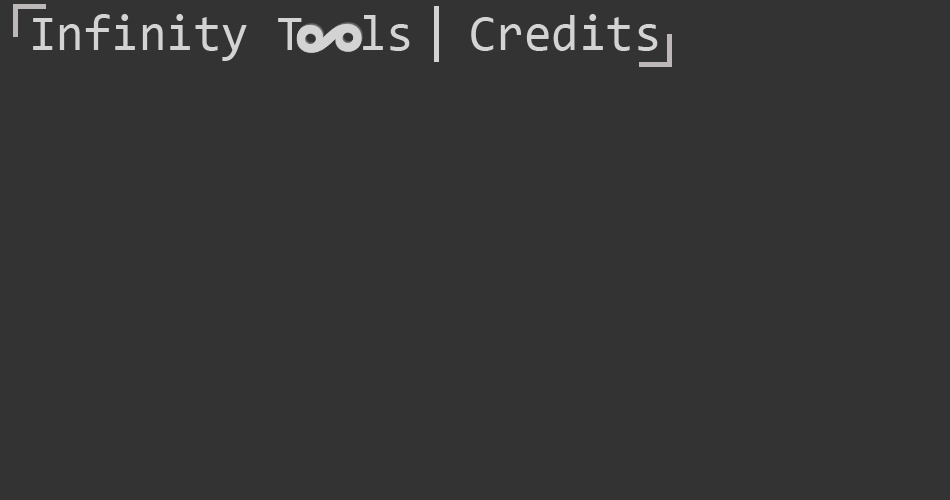
<style>
.page{position:relative;width:950px;height:500px;background:#333333}
.page>*{position:absolute;margin:0}
.t1{font:50px "Consolas";color:#d3d3d3}
</style>
<div class="page">
<p class="t1" style="left:33px;top:14px;width:625px;height:47px">Infinity T  ls  Credits</p>
</div>
